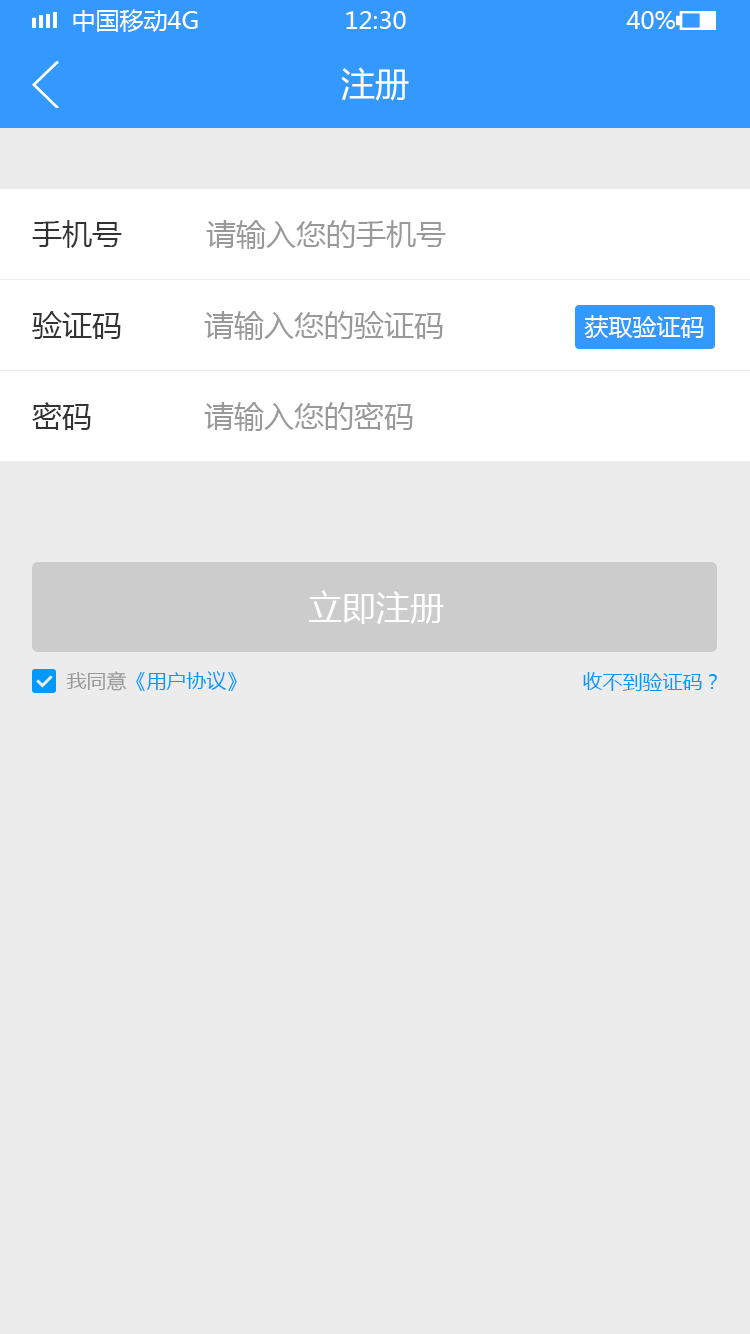
<style>
.page{position:relative;width:750px;height:1334px;background:#ececec}
.page>*{position:absolute;margin:0}
.t1{font:24px "MicrosoftYaHei";color:#ffffff;text-transform:uppercase}
.t2{font:34px "MicrosoftYaHei";color:#ffffff}
.t3{font:30px "MicrosoftYaHei";color:#333333}
.t4{font:30px "MicrosoftYaHei";color:#999999}
.t5{font:24px "MicrosoftYaHei";color:#ffffff}
.t6{font:20px "MicrosoftYaHei";color:#0099ff}
.t7{font:20px "MicrosoftYaHei";color:#999999}
</style>
<div class="page">
<p class="t1" style="left:73px;top:9px;width:125px;height:23px">中国移动4G</p>
<p class="t1" style="left:346px;top:11px;width:60px;height:18px">12:30</p>
<p class="t1" style="left:626px;top:11px;width:49px;height:18px">40%</p>
<p class="t2" style="left:341px;top:67px;width:68px;height:34px">注册</p>
<p class="t3" style="left:32px;top:220px;width:90px;height:28px">手机号</p>
<p class="t4" style="left:206px;top:220px;width:240px;height:29px">请输入您的手机号</p>
<p class="t3" style="left:32px;top:311px;width:89px;height:28px">验证码</p>
<p class="t4" style="left:204px;top:311px;width:239px;height:29px">请输入您的验证码</p>
<p class="t5" style="left:584px;top:315px;width:120px;height:23px">获取验证码</p>
<p class="t3" style="left:32px;top:402px;width:59px;height:28px">密码</p>
<p class="t4" style="left:204px;top:402px;width:209px;height:29px">请输入您的密码</p>
<p class="t2" style="left:309px;top:590px;width:135px;height:34px">立即注册</p>
<p class="t6" style="left:66px;top:671px;width:171px;height:20px"><span class="t7">我同意</span>《用户协议》</p>
<p class="t6" style="left:583px;top:672px;width:134px;height:19px">收不到验证码？</p>
</div>
